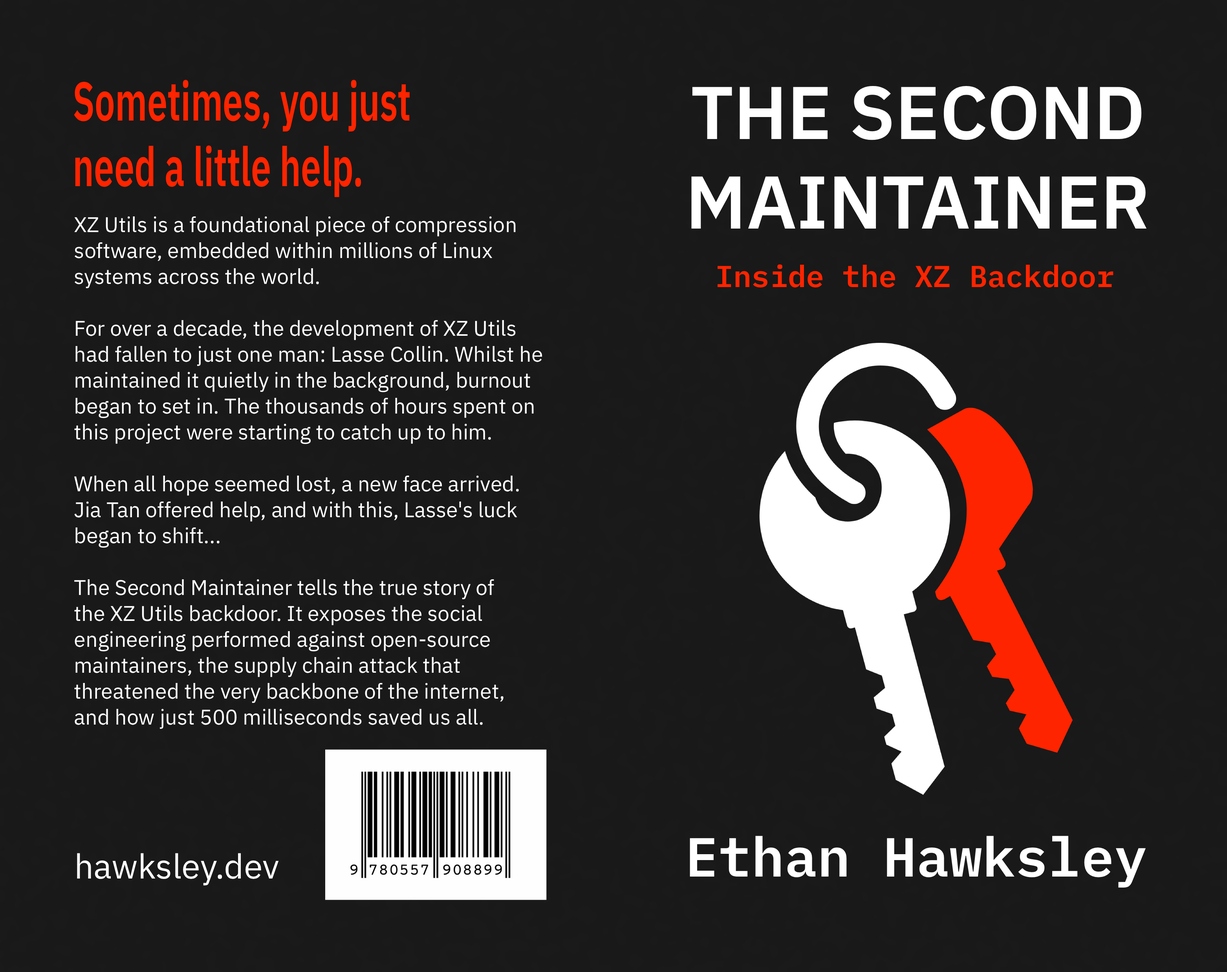
<style>
.page{position:relative;width:1227px;height:972px;background:#191919}
.page>*{position:absolute;margin:0}
.t1{font:54.6px "IBMPlexSans-SemiBold";color:#ff2400;scale:0.66 1}
.t2{font:74.6px "IBMPlexSans-SemiBold";color:#ffffff}
.t3{font:21.2px/25.9px "IBMPlexSans-Regular";color:#ffffff}
.t4{font:30.2px "IBMPlexMono-SemiBold";color:#ff2400}
.t5{font:55px "IBMPlexMono-SemiBold";color:#ffffff}
.t6{font:34.2px "IBMPlexSans-Regular";color:#ffffff}
</style>
<div class="page">
<p class="t1" style="left:74px;top:80px;width:336px;height:117px">Sometimes, you just<br>need a little help.</p>
<p class="t2" style="left:691px;top:86px;width:456px;height:143px;text-align:center">THE SECOND<br>MAINTAINER</p>
<p class="t3" style="left:74px;top:216px;width:468px;height:513px">XZ Utils is a foundational piece of compression<br>software, embedded within millions of Linux<br>systems across the world.<br><br>For over a decade, the development of XZ Utils<br>had fallen to just one man: Lasse Collin. Whilst he<br>maintained it quietly in the background, burnout<br>began to set in. The thousands of hours spent on<br>this project were starting to catch up to him.<br><br>When all hope seemed lost, a new face arrived.<br>Jia Tan offered help, and with this, Lasse's luck<br>began to shift...<br><br>The Second Maintainer tells the true story of<br>the XZ Utils backdoor. It exposes the social<br>engineering performed against open-source<br>maintainers, the supply chain attack that<br>threatened the very backbone of the internet,<br>and how just 500 milliseconds saved us all.</p>
<p class="t4" style="left:717px;top:264px;width:396px;height:23px">Inside the XZ Backdoor</p>
<p class="t5" style="left:690px;top:836px;width:456px;height:52px">Ethan Hawksley</p>
<p class="t6" style="left:77px;top:853px;width:202px;height:33px">hawksley.dev</p>
</div>
